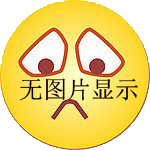
<style>
.page{position:relative;width:150px;height:150px;background:#ffffff}
.page>*{position:absolute;margin:0}
.t1{font:24px "SimSun";color:#0a0000}
</style>
<div class="page">
<p class="t1" style="left:20px;top:78px;width:118px;height:23px">无图片显示</p>
</div>
